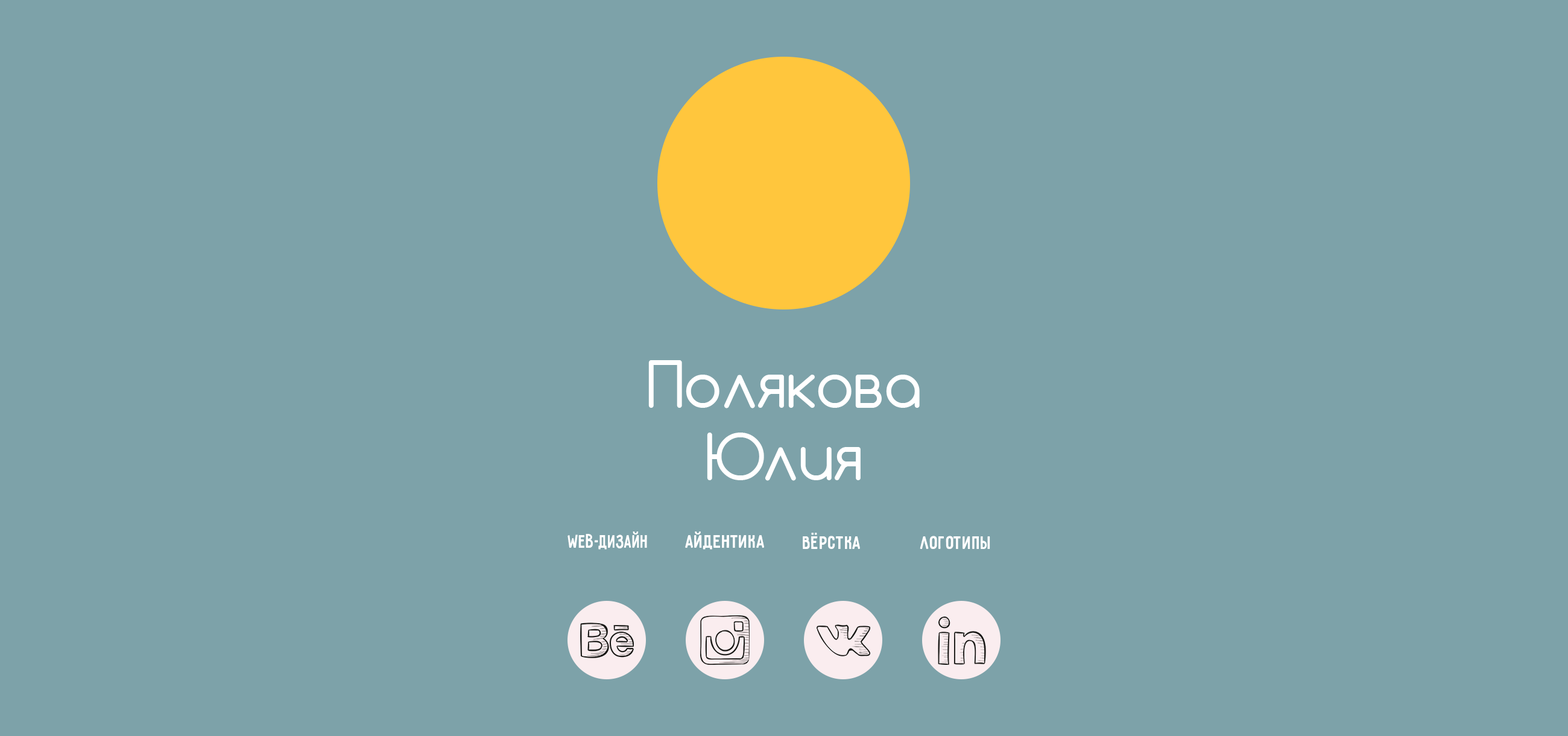
<style>
.page{position:relative;width:1568px;height:736px;background:#7da2a9}
.page>*{position:absolute;margin:0}
.t1{font:60.3px "Comfortaa";color:#ffffff}
.t2{font:20.2px "Pribambas-Regular";color:#ffffff;scale:0.89 1}
.t3{font:20.2px "Pribambas-Regular";color:#ffffff}
</style>
<div class="page">
<p class="t1" style="left:648px;top:360px;width:272px;height:121px;text-align:center">Полякова<br>Юлия</p>
<p class="t2" style="left:567px;top:531px;width:80px;height:18px">Web-дизайн</p>
<p class="t3" style="left:685px;top:531px;width:79px;height:18px">Айдентика</p>
<p class="t3" style="left:803px;top:533px;width:57px;height:16px">Вёрстка</p>
<p class="t3" style="left:920px;top:536px;width:70px;height:13px">Логотипы</p>
</div>
